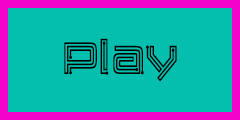
<style>
.page{position:relative;width:240px;height:120px;background:#04bfad}
.page>*{position:absolute;margin:0}
.t1{font:44px "Membra";color:#010101;scale:0.81 1}
</style>
<div class="page">
<p class="t1" style="left:64px;top:38px;width:113px;height:44px">Play</p>
</div>
